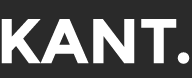
<style>
.page{position:relative;width:192px;height:78px;background:#2a2a2a}
.page>*{position:absolute;margin:0}
.t1{font:63px "Montserrat-Bold";color:#ffffff}
</style>
<div class="page">
<p class="t1" style="left:1px;top:19px;width:189px;height:45px">KANT.</p>
</div>
